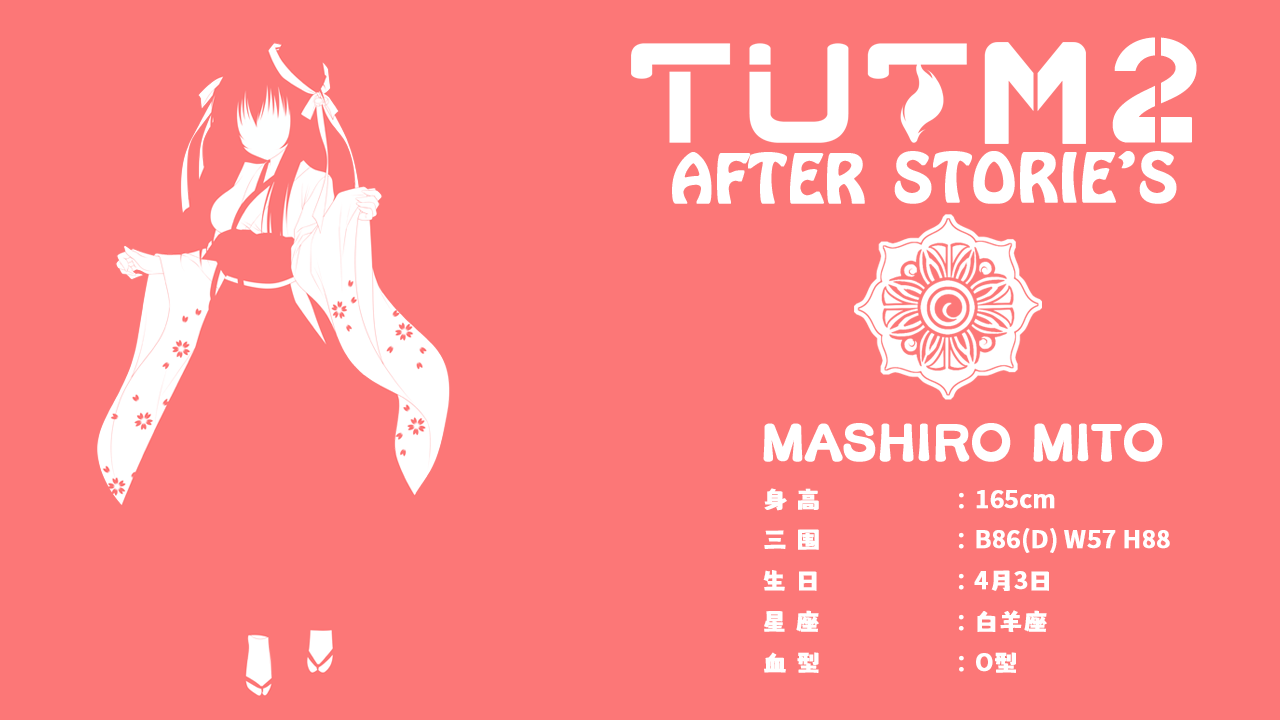
<style>
.page{position:relative;width:1280px;height:720px;background:#fc7777}
.page>*{position:absolute;margin:0}
.t1{font:24px "MaokenAssortedSans";color:#ffffff;font-weight:bold}
.t2{font:24px "AdobeHeitiStd-Regular";color:#ffffff;font-weight:bold}
.t3{font:24px "SourceHanSansSC-Bold";color:#ffffff;font-weight:bold}
</style>
<div class="page">
<p class="t1" style="left:764px;top:488px;width:200px;height:23px">身 高               <span class="t2">：</span></p>
<p class="t3" style="left:976px;top:490px;width:79px;height:19px">165cm</p>
<p class="t1" style="left:764px;top:529px;width:200px;height:21px">三 围               <span class="t2">：</span></p>
<p class="t3" style="left:976px;top:528px;width:194px;height:25px">B86(D) W57 H88</p>
<p class="t1" style="left:763px;top:570px;width:201px;height:21px">生 日               <span class="t2">：</span></p>
<p class="t3" style="left:974px;top:570px;width:75px;height:21px">4<span class="t1">月</span>3<span class="t1">日</span></p>
<p class="t1" style="left:764px;top:610px;width:200px;height:22px">星 座               <span class="t2">：</span></p>
<p class="t1" style="left:977px;top:610px;width:70px;height:22px">白羊座</p>
<p class="t1" style="left:764px;top:652px;width:200px;height:21px">血 型               <span class="t2">：</span></p>
<p class="t3" style="left:976px;top:652px;width:40px;height:21px">O<span class="t1">型</span></p>
</div>
